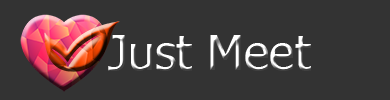
<style>
.page{position:relative;width:390px;height:100px;background:#333333}
.page>*{position:absolute;margin:0}
.t1{font:48px "Tahoma"}
</style>
<div class="page">
<p class="t1" style="left:108px;top:35px;width:203px;height:36px">Just Meet</p>
</div>
